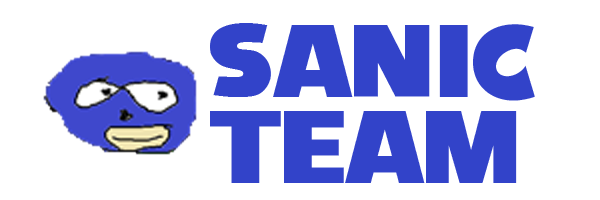
<style>
.page{position:relative;width:600px;height:200px;background:#ffffff}
.page>*{position:absolute;margin:0}
.t1{font:36px "SonicFont";color:#3243c9}
</style>
<div class="page">
<p class="t1" style="left:210px;top:23px;width:325px;height:160px">sanic<br><br>team</p>
</div>
